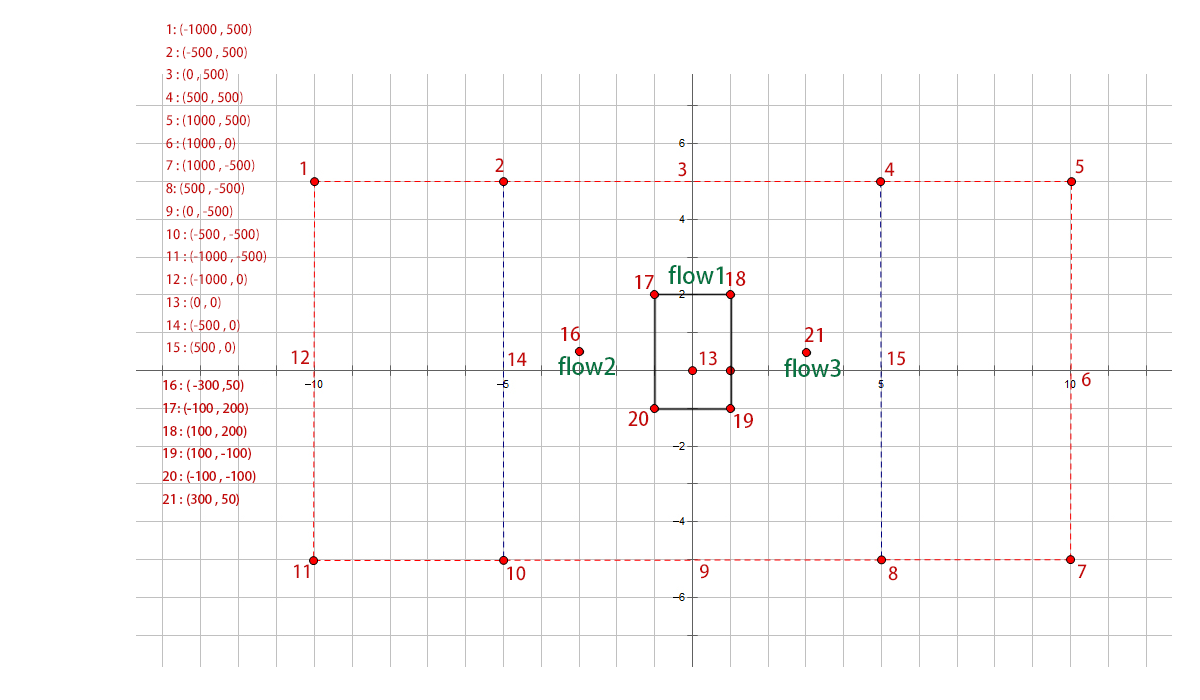
<style>
.page{position:relative;width:1200px;height:700px;background:#ffffff}
.page>*{position:absolute;margin:0}
.t1{font:13px "AdobeHeitiStd-Regular";color:#c40a0a}
.t2{font:18px "AdobeHeitiStd-Regular";color:#c40a0a}
.t3{font:23px "AdobeHeitiStd-Regular";color:#077342}
.t4{font:19px "AdobeHeitiStd-Regular";color:#c40a0a}
</style>
<div class="page">
<p class="t1" style="left:166px;top:23px;width:100px;height:331px">1: (-1000 , 500)<br>2 : (-500 , 500)<br>3 : (0 , 500)<br>4 : (500 , 500)<br>5 : (1000 , 500)<br>6 : (1000 , 0)<br>7 : (1000 , -500)<br>8: (500 , -500)<br>9 : (0 , -500)<br>10 : (-500 , -500)<br>11 : (-1000 , -500)<br>12 : (-1000 , 0)<br>13 : (0 , 0)<br>14 : (-500 , 0)<br>15 : (500 , 0)</p>
<p class="t2" style="left:300px;top:161px;width:6px;height:14px">1</p>
<p class="t2" style="left:495px;top:158px;width:9px;height:14px">2</p>
<p class="t2" style="left:1075px;top:159px;width:9px;height:15px">5</p>
<p class="t2" style="left:678px;top:162px;width:9px;height:15px">3</p>
<p class="t2" style="left:884px;top:162px;width:11px;height:14px">4</p>
<p class="t3" style="left:668px;top:265px;width:55px;height:19px">flow1</p>
<p class="t4" style="left:635px;top:275px;width:19px;height:14px">17</p>
<p class="t4" style="left:726px;top:271px;width:20px;height:15px">18</p>
<p class="t4" style="left:561px;top:326px;width:19px;height:15px">16</p>
<p class="t4" style="left:804px;top:327px;width:18px;height:15px">21</p>
<p class="t2" style="left:291px;top:350px;width:18px;height:14px">12</p>
<p class="t2" style="left:508px;top:352px;width:19px;height:14px">14</p>
<p class="t2" style="left:699px;top:351px;width:18px;height:15px">13</p>
<p class="t2" style="left:888px;top:351px;width:17px;height:15px">15</p>
<p class="t3" style="left:558px;top:356px;width:57px;height:19px">flow2</p>
<p class="t3" style="left:784px;top:358px;width:57px;height:19px">flow3</p>
<p class="t2" style="left:1082px;top:372px;width:9px;height:15px">6</p>
<p class="t1" style="left:162px;top:379px;width:94px;height:127px">16 : ( -300 ,50)<br>17: (-100 , 200)<br>18 : (100 , 200)<br>19 : (100 , -100)<br>20 : (-100 , -100)<br>21 : (300 , 50)</p>
<p class="t4" style="left:628px;top:411px;width:21px;height:15px">20</p>
<p class="t4" style="left:734px;top:413px;width:19px;height:15px">19</p>
<p class="t2" style="left:294px;top:564px;width:15px;height:14px">11</p>
<p class="t2" style="left:507px;top:566px;width:19px;height:15px">10</p>
<p class="t2" style="left:700px;top:564px;width:9px;height:15px">9</p>
<p class="t2" style="left:888px;top:566px;width:10px;height:15px">8</p>
<p class="t2" style="left:1078px;top:564px;width:9px;height:14px">7</p>
</div>
